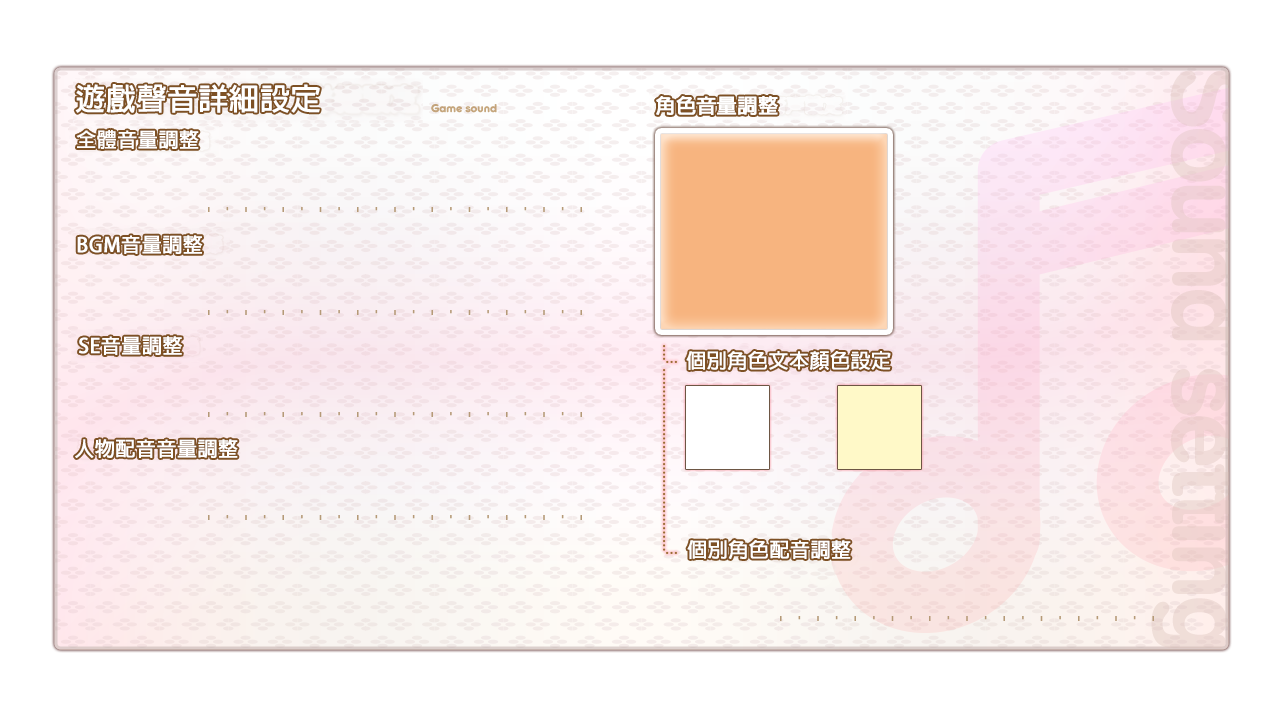
<style>
.page{position:relative;width:1280px;height:720px;background:#ffffff}
.page>*{position:absolute;margin:0}
.t1{font:30px "AdobeFanHeitiStd-Bold";color:#ffffff;font-weight:bold}
.t2{font:20px "AdobeFanHeitiStd-Bold";color:#ffffff;font-weight:bold}
</style>
<div class="page">
<p class="t1" style="left:75px;top:84px;width:245px;height:29px">遊戲聲音詳細設定</p>
<p class="t2" style="left:656px;top:95px;width:122px;height:20px">角色音量調整</p>
<p class="t2" style="left:76px;top:130px;width:123px;height:19px">全體音量調整</p>
<p class="t2" style="left:77px;top:235px;width:126px;height:19px">BGM音量調整</p>
<p class="t2" style="left:79px;top:336px;width:103px;height:19px">SE音量調整</p>
<p class="t2" style="left:686px;top:351px;width:205px;height:19px">個別角色文本顏色設定</p>
<p class="t2" style="left:75px;top:439px;width:163px;height:19px">人物配音音量調整</p>
<p class="t2" style="left:687px;top:540px;width:164px;height:19px">個別角色配音調整</p>
</div>
